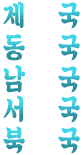
<style>
.page{position:relative;width:83px;height:155px;background:#ffffff}
.page>*{position:absolute;margin:0}
.t1{font:30px "SDKukdetopokki-bBd";scale:0.8 1}
</style>
<div class="page">
<p class="t1" style="left:3px;top:1px;width:77px;height:28px">제     국</p>
<p class="t1" style="left:3px;top:34px;width:77px;height:27px">동     국</p>
<p class="t1" style="left:3px;top:65px;width:77px;height:28px">남     국</p>
<p class="t1" style="left:3px;top:95px;width:77px;height:28px">서     국</p>
<p class="t1" style="left:3px;top:126px;width:77px;height:28px">북     국</p>
</div>
